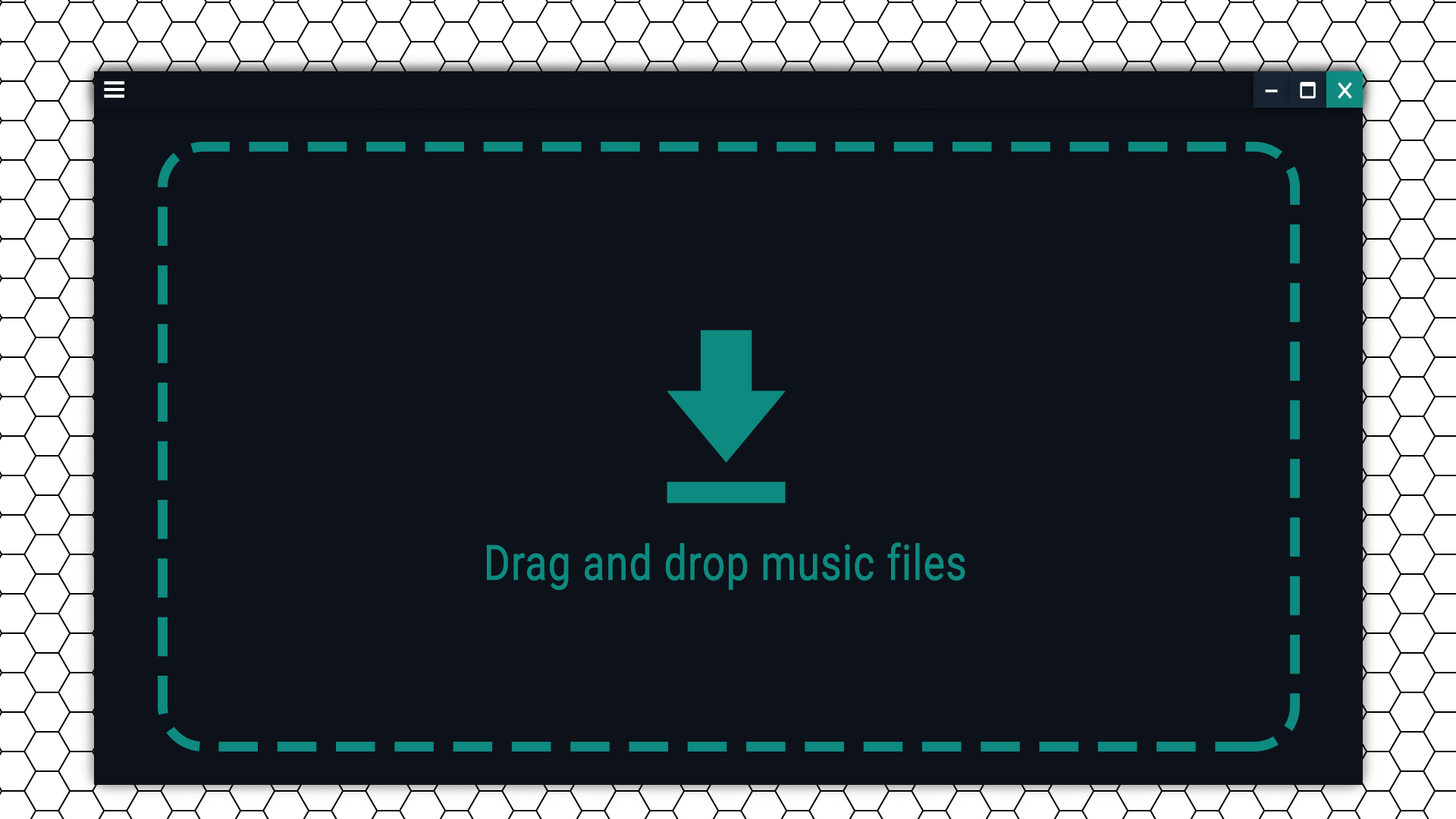
<style>
.page{position:relative;width:1456px;height:819px;background:#0d121a}
.page>*{position:absolute;margin:0}
.t1{font:48.5px "Roboto-Regular";color:#0e8a80;font-weight:bold;scale:0.83 1}
</style>
<div class="page">
<p class="t1" style="left:487px;top:542px;width:478px;height:48px">Drag and drop music files</p>
</div>
